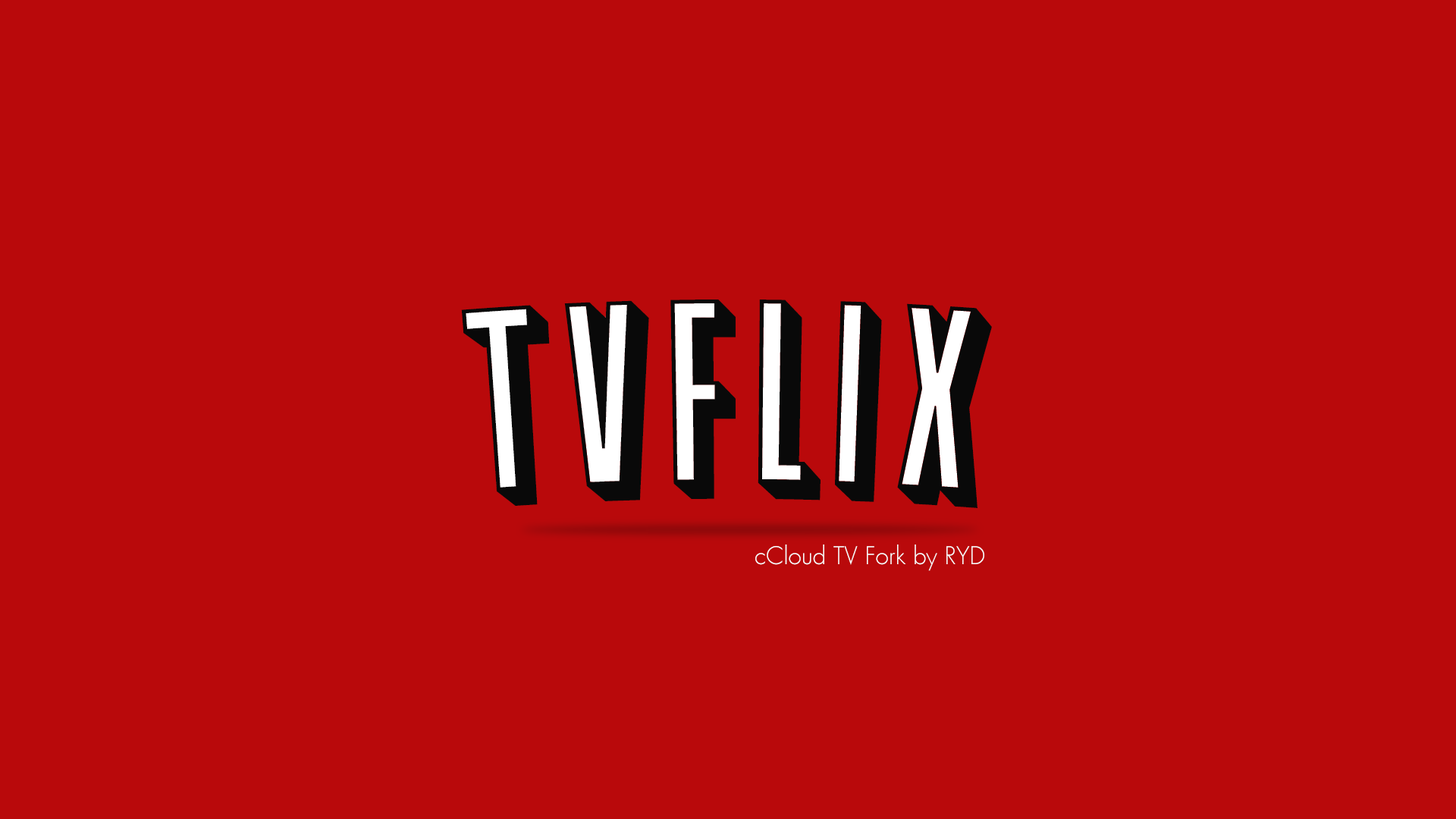
<style>
.page{position:relative;width:1456px;height:819px;background:#b9090b}
.page>*{position:absolute;margin:0}
.t1{font:239.3px "GraphiquePro";color:#090909}
.t2{font:23.9px "FuturaLight";color:#fafafa}
</style>
<div class="page">
<p class="t1" style="left:461px;top:300px;width:531px;height:208px">tvflix</p>
<p class="t2" style="left:755px;top:544px;width:229px;height:27px">cCloud TV Fork by RYD</p>
</div>
